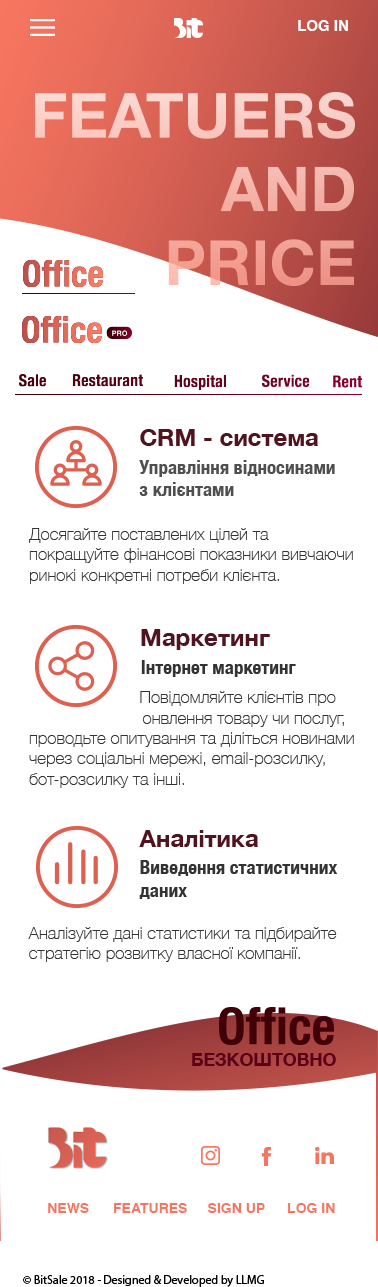
<style>
.page{position:relative;width:378px;height:1287px;background:#ffffff}
.page>*{position:absolute;margin:0}
.t1{font:15px "Helvetica-Bold";color:#ffffff;font-variant:small-caps}
.t2{font:24px "HelveticaNeue-Bold";color:#50141e}
.t3{font:19px "HelveticaNeue-CondensedBold";color:#4f4f4f}
.t4{font:17px "HelveticaNeue-Thin";color:#333333}
.t5{font:19px "HelveticaNeue-CondensedBold";color:#333333}
.t6{font:14px "Helvetica-Bold";color:#f5755f;font-variant:small-caps}
.t7{font:12px "MyriadPro-Regular";color:#000000}
</style>
<div class="page">
<p class="t1" style="left:298px;top:20px;width:50px;height:11px">LOG IN</p>
<p class="t2" style="left:140px;top:429px;width:178px;height:17px">CRM - система</p>
<p class="t3" style="left:139px;top:460px;width:196px;height:36px">Управління відносинами <br>з клієнтами</p>
<p class="t4" style="left:29px;top:528px;width:324px;height:56px">Досягайте поставлених цілей та покращуйте фінансові показники вивчаючи ринокі конкретні потреби клієнта.</p>
<p class="t2" style="left:141px;top:629px;width:129px;height:21px">Маркетинг</p>
<p class="t5" style="left:141px;top:660px;width:155px;height:17px">Інтернет маркетинг</p>
<p class="t4" style="left:29px;top:691px;width:325px;height:97px">Повідомляйте клієнтів про                           онвлення товару чи послуг, проводьте опитування та діліться новинами через соціальні мережі, email-розсилку, бот-розсилку та інші.</p>
<p class="t2" style="left:139px;top:830px;width:119px;height:17px">Аналітика</p>
<p class="t5" style="left:139px;top:860px;width:199px;height:39px">Виведення статистичних <br>даних</p>
<p class="t4" style="left:28px;top:927px;width:309px;height:35px">Аналізуйте дані статистики та підбирайте <br>стратегію розвитку власної компанії.</p>
<p class="t6" style="left:48px;top:1203px;width:41px;height:10px">NEWS</p>
<p class="t6" style="left:114px;top:1203px;width:73px;height:10px">FEATURES</p>
<p class="t6" style="left:208px;top:1203px;width:57px;height:10px">SIGN UP</p>
<p class="t6" style="left:288px;top:1203px;width:47px;height:10px">LOG IN</p>
<p class="t7" style="left:23px;top:1275px;width:241px;height:12px">© BitSale 2018 - Designed &amp; Developed by LLMG</p>
</div>
